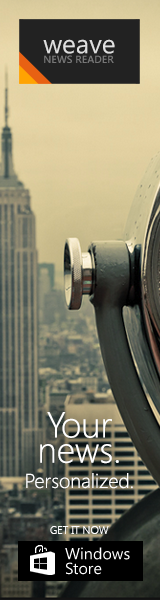
<style>
.page{position:relative;width:160px;height:600px}
.page>*{position:absolute;margin:0}
.t1{font:10.4px/9.7px "SegoeUI-Semibold";color:#767676}
.t2{font:26.3px/9.7px "SegoeUI";color:#dfdfdf}
.t3{font:20px/25.3px "SegoeUI-Light";color:#ffffff}
.t4{font:36px/25.3px "SegoeUI-Light";color:#ffffff}
.t5{font:11px "SegoeUI-Light";color:#ffffff}
</style>
<div class="page">
<p class="t1" style="left:43px;top:39px;width:72px;height:24px"><span class="t2">weave<br></span>NEWS READER</p>
<p class="t3" style="left:26px;top:412px;width:107px;height:77px;text-align:center"><span class="t4">Your<br>news.<br></span>Personalized.</p>
<p class="t5" style="left:50px;top:526px;width:59px;height:8px">GET IT NOW</p>
</div>
